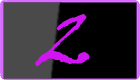
<style>
.page{position:relative;width:140px;height:80px;background:#000000}
.page>*{position:absolute;margin:0}
.t1{font:74.2px "VinerHandITC";color:#d015f2}
</style>
<div class="page">
<p class="t1" style="left:35px;top:13px;width:55px;height:54px">2</p>
</div>
